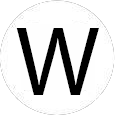
<style>
.page{position:relative;width:115px;height:115px;background:#ffffff}
.page>*{position:absolute;margin:0}
.t1{font:100px "MyriadPro-Regular";color:#000000}
</style>
<div class="page">
<p class="t1" style="left:16px;top:28px;width:83px;height:67px">W</p>
</div>
